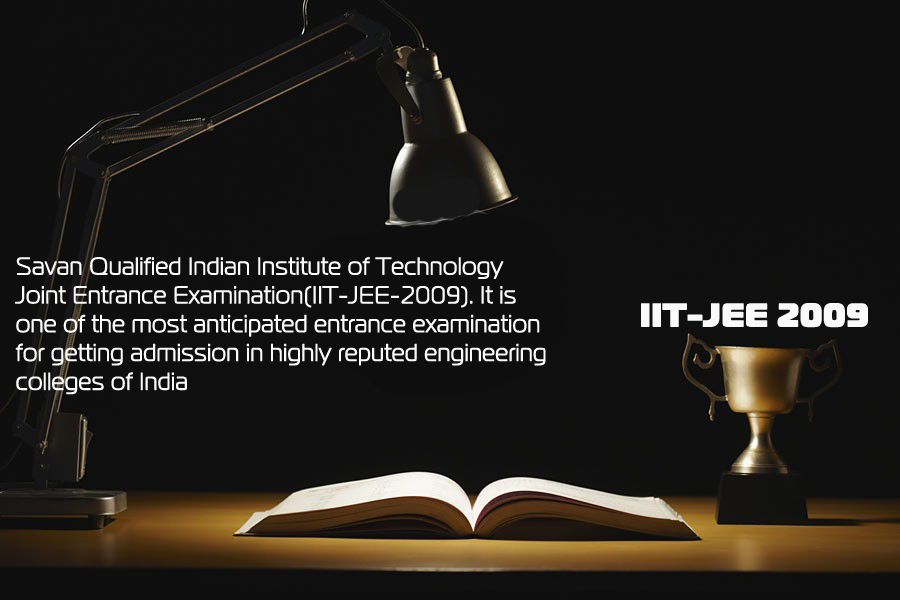
<style>
.page{position:relative;width:900px;height:600px;background:#0e0e0e}
.page>*{position:absolute;margin:0}
.t1{font:24px "MagistralC";letter-spacing:0.005em;color:#fafafb;font-weight:bold}
.t2{font:32.4px "MagistralBlackC";letter-spacing:0.005em;color:#fafafb;font-weight:bold}
</style>
<div class="page">
<p class="t1" style="left:15px;top:257px;width:531px;height:138px">Savan Qualified Indian Institute of Technology<br>Joint Entrance Examination(IIT-JEE-2009). It is<br>one of the most anticipated entrance examination<br>for getting admission in highly reputed engineering <br>colleges of India</p>
<p class="t2" style="left:641px;top:303px;width:227px;height:25px">IIT-JEE 2009</p>
</div>
